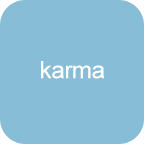
<style>
.page{position:relative;width:144px;height:144px;background:#88bdd7}
.page>*{position:absolute;margin:0}
.t1{font:24px "ArialMT";letter-spacing:-0.025em;color:#fefefe}
</style>
<div class="page">
<p class="t1" style="left:41px;top:61px;width:64px;height:18px">karma</p>
</div>
